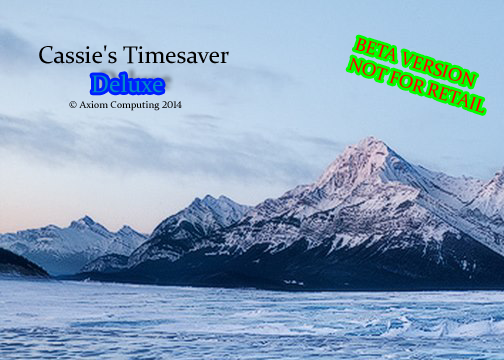
<style>
.page{position:relative;width:504px;height:360px}
.page>*{position:absolute;margin:0}
.t1{font:18px "Constantia";color:#ff0000}
.t2{font:24px "Constantia";color:#000000}
.t3{font:24px "Constantia";color:#008dc8}
.t4{font:10px "Constantia";color:#000000}
</style>
<div class="page">
<p class="t1" style="left:348px;top:37px;width:136px;height:76px;rotate:18deg">BETA VERSION<br>NOT FOR RETAIL</p>
<p class="t2" style="left:39px;top:45px;width:190px;height:19px">Cassie's Timesaver</p>
<p class="t3" style="left:92px;top:74px;width:71px;height:19px">Deluxe</p>
<p class="t4" style="left:69px;top:101px;width:113px;height:10px">© Axiom Computing 2014</p>
</div>
